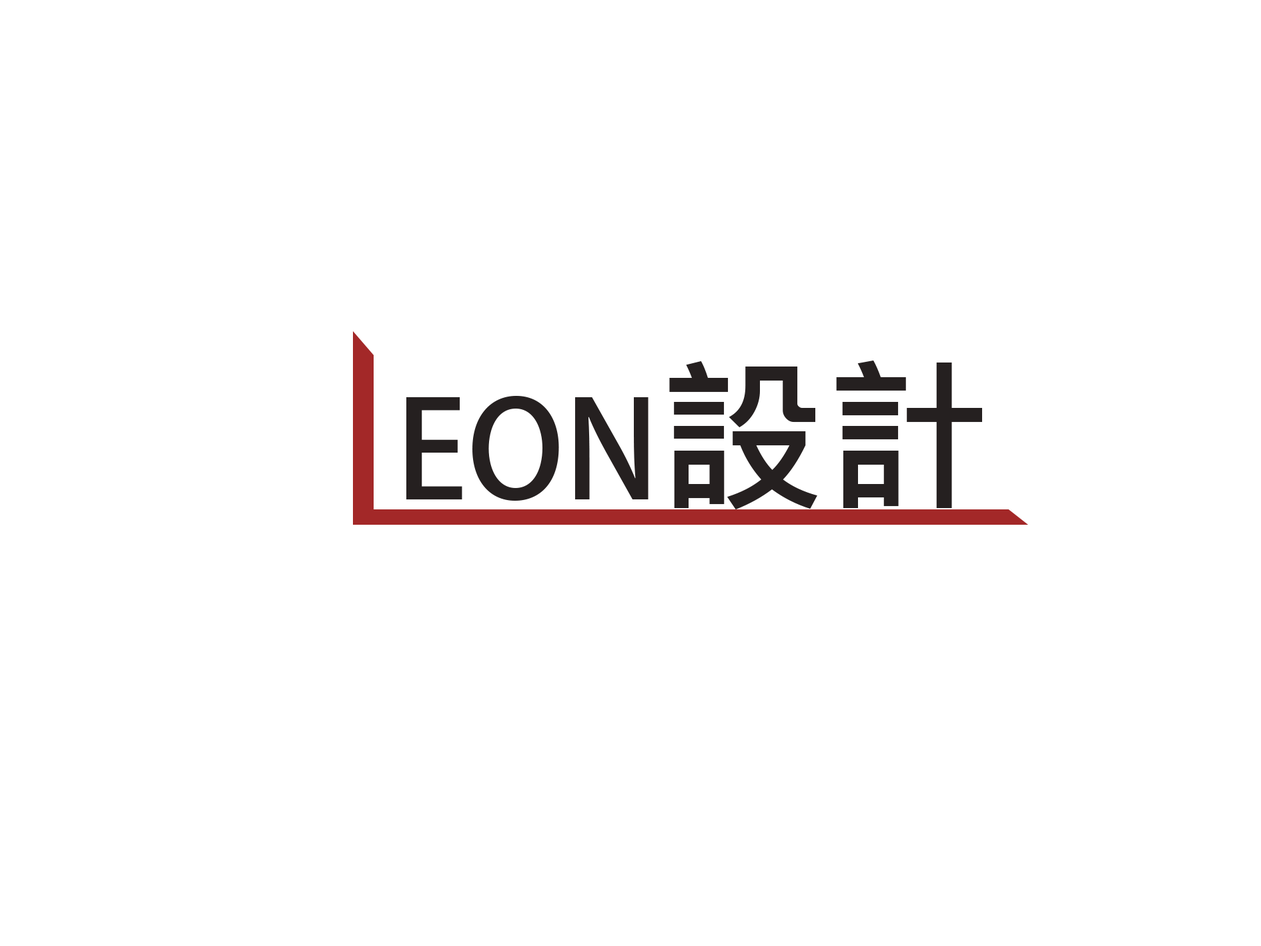
<style>
.page{position:relative;width:1261px;height:946px;background:#ffffff}
.page>*{position:absolute;margin:0}
.t1{font:133.5px "AdobeFanHeitiStd-Bold";color:#252020}
.t2{font:166.8px "MicrosoftJhengHeiBold";color:#252020}
</style>
<div class="page">
<p class="t1" style="left:406px;top:360px;width:576px;height:149px">EON<span class="t2">設計</span></p>
</div>
